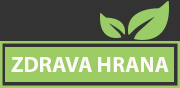
<style>
.page{position:relative;width:180px;height:88px;background:#333333}
.page>*{position:absolute;margin:0}
.t1{font:22px "MyriadPro-Bold";color:#fdf9f9;text-transform:uppercase}
</style>
<div class="page">
<p class="t1" style="left:11px;top:57px;width:158px;height:15px">zdrava hrana</p>
</div>
